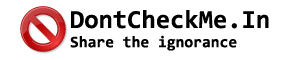
<style>
.page{position:relative;width:300px;height:60px;background:#ffffff}
.page>*{position:absolute;margin:0}
.t1{font:16px "Consolas-Bold";color:#000000}
.t2{font:26px "Consolas-Bold";color:#000000}
</style>
<div class="page">
<p class="t1" style="left:70px;top:10px;width:199px;height:41px"><span class="t2">DontCheckMe.In<br></span>Share the ignorance</p>
</div>
